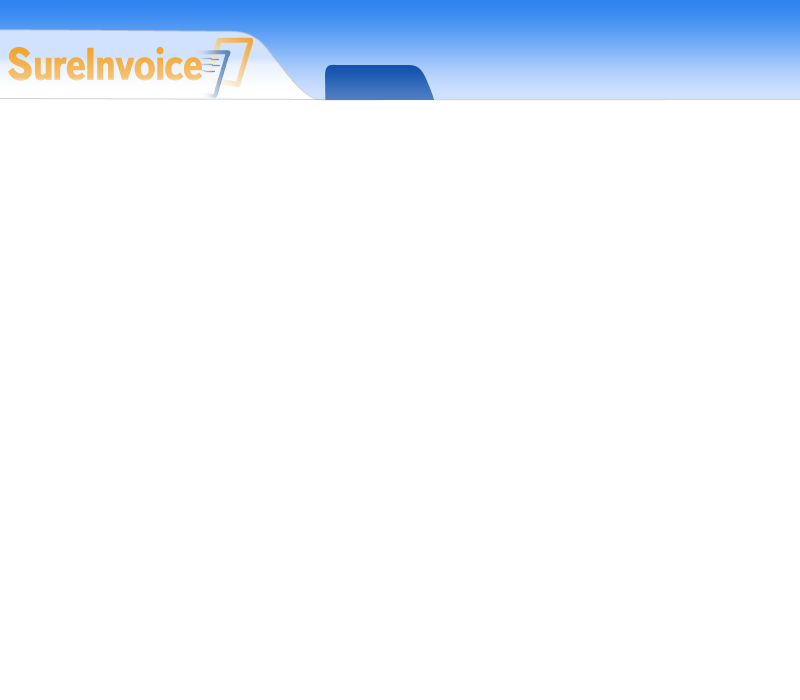
<style>
.page{position:relative;width:800px;height:700px;background:#ffffff}
.page>*{position:absolute;margin:0}
.t1{font:45.6px "TextBookCBold";letter-spacing:-0.05em;scale:0.87 1}
</style>
<div class="page">
<p class="t1" style="left:8px;top:46px;width:194px;height:35px">SureInvoice</p>
</div>
